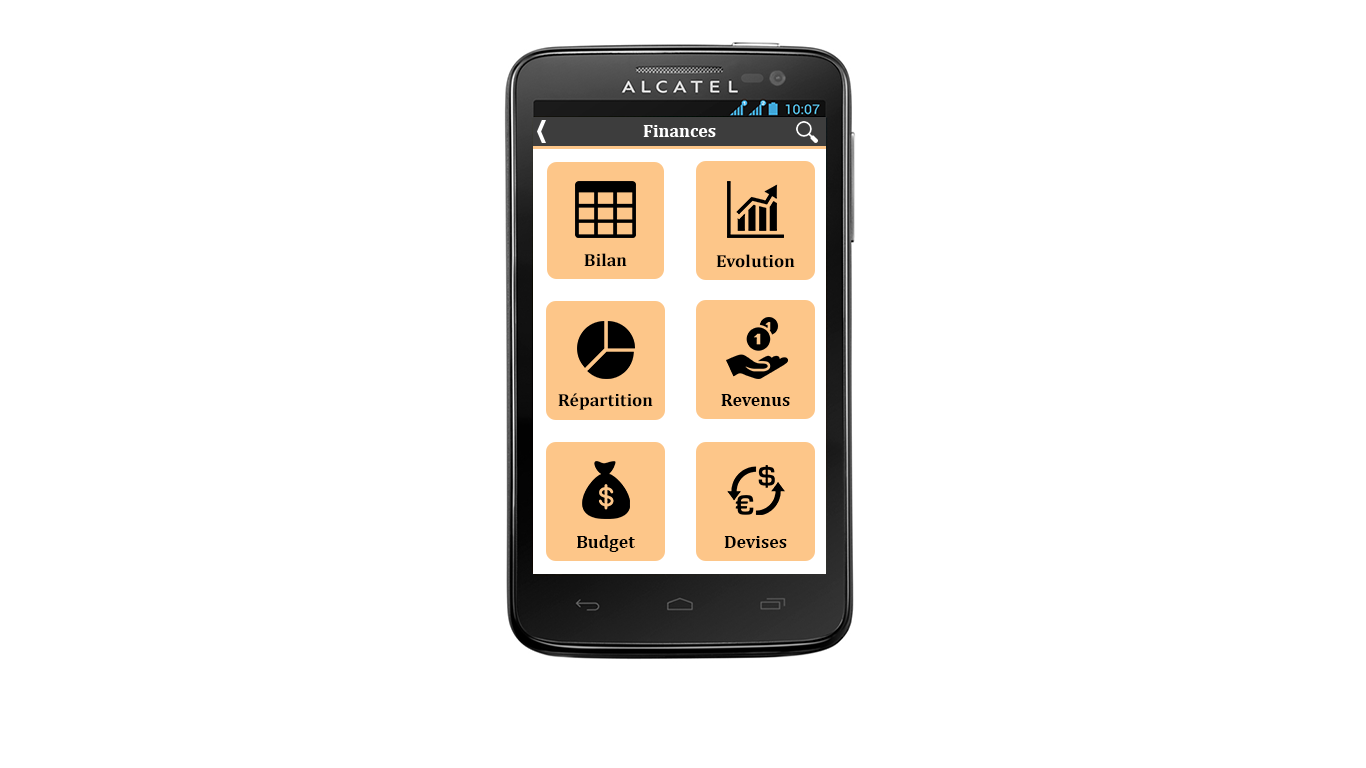
<style>
.page{position:relative;width:1366px;height:768px;background:#ffffff}
.page>*{position:absolute;margin:0}
.t1{font:18px "Cambria-Bold";color:#ffffff}
.t2{font:17.7px "Cambria-Bold";color:#000000}
.t3{font:18px "Cambria-Bold";color:#000000}
</style>
<div class="page">
<p class="t1" style="left:643px;top:125px;width:73px;height:12px">Finances</p>
<p class="t2" style="left:584px;top:253px;width:43px;height:14px">Bilan</p>
<p class="t2" style="left:716px;top:254px;width:79px;height:14px">Evolution</p>
<p class="t2" style="left:558px;top:393px;width:95px;height:17px">Répartition</p>
<p class="t3" style="left:721px;top:394px;width:69px;height:12px">Revenus</p>
<p class="t3" style="left:577px;top:535px;width:58px;height:17px">Budget</p>
<p class="t3" style="left:724px;top:536px;width:63px;height:12px">Devises</p>
</div>
